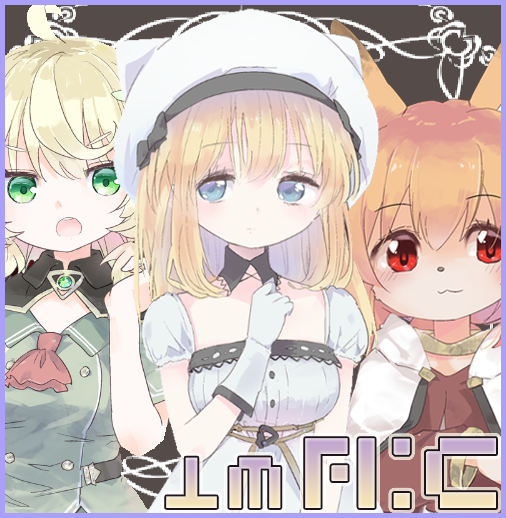
<style>
.page{position:relative;width:506px;height:518px}
.page>*{position:absolute;margin:0}
.t1{font:100px "Undefined"}
</style>
<div class="page">
<p class="t1" style="left:305px;top:438px;width:191px;height:70px">AIC</p>
</div>
